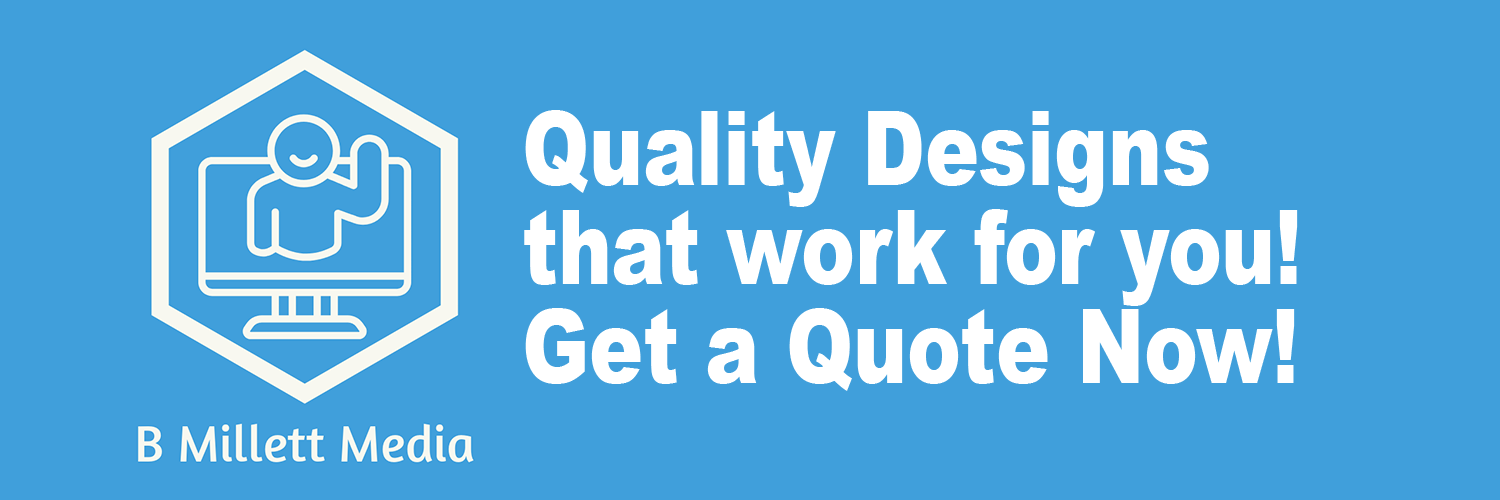
<style>
.page{position:relative;width:1500px;height:500px;background:#409fdb}
.page>*{position:absolute;margin:0}
.t1{font:103.7px/99px "Arial-Black";color:#ffffff;scale:0.78 1}
</style>
<div class="page">
<p class="t1" style="left:524px;top:110px;width:774px;height:281px">Quality Designs<br>that work for you!<br>Get a Quote Now!</p>
</div>
